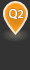
<style>
.page{position:relative;width:30px;height:70px;background:#333333}
.page>*{position:absolute;margin:0}
.t1{font:12px "MyriadPro-Regular";color:#ffffff}
</style>
<div class="page">
<p class="t1" style="left:9px;top:9px;width:15px;height:10px">Q2</p>
</div>
